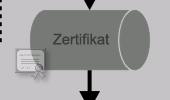
<style>
.page{position:relative;width:170px;height:100px;background:#c6c3c6}
.page>*{position:absolute;margin:0}
.t1{font:14.7px "ArialMT";color:#3b3c3b}
</style>
<div class="page">
<p class="t1" style="left:53px;top:33px;width:57px;height:12px">Zertifikat</p>
</div>
